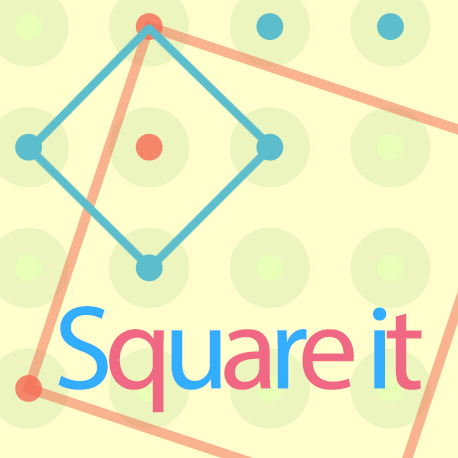
<style>
.page{position:relative;width:458px;height:458px;background:#fffecc}
.page>*{position:absolute;margin:0}
.t1{font:120px "MyriadPro-Regular";letter-spacing:-0.075em;color:#33adff}
.t2{font:120px "MyriadPro-Regular";letter-spacing:-0.075em;color:#f16884}
</style>
<div class="page">
<p class="t1" style="left:58px;top:306px;width:364px;height:107px">S<span class="t2">q</span>u<span class="t2">a</span>r<span class="t2">e</span> i<span class="t2">t</span></p>
</div>
